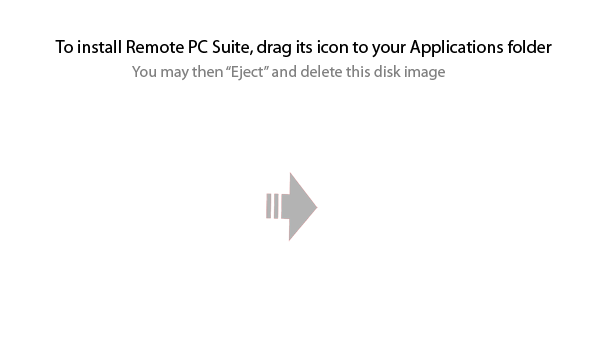
<style>
.page{position:relative;width:598px;height:353px;background:#ffffff}
.page>*{position:absolute;margin:0}
.t1{font:18px "MyriadPro-Regular";color:#000000}
.t2{font:16px "MyriadPro-Regular";color:#818181}
</style>
<div class="page">
<p class="t1" style="left:55px;top:40px;width:497px;height:18px">To install Remote PC Suite, drag its icon to your Applications folder</p>
<p class="t2" style="left:132px;top:65px;width:313px;height:16px">You may then “Eject” and delete this disk image</p>
</div>
